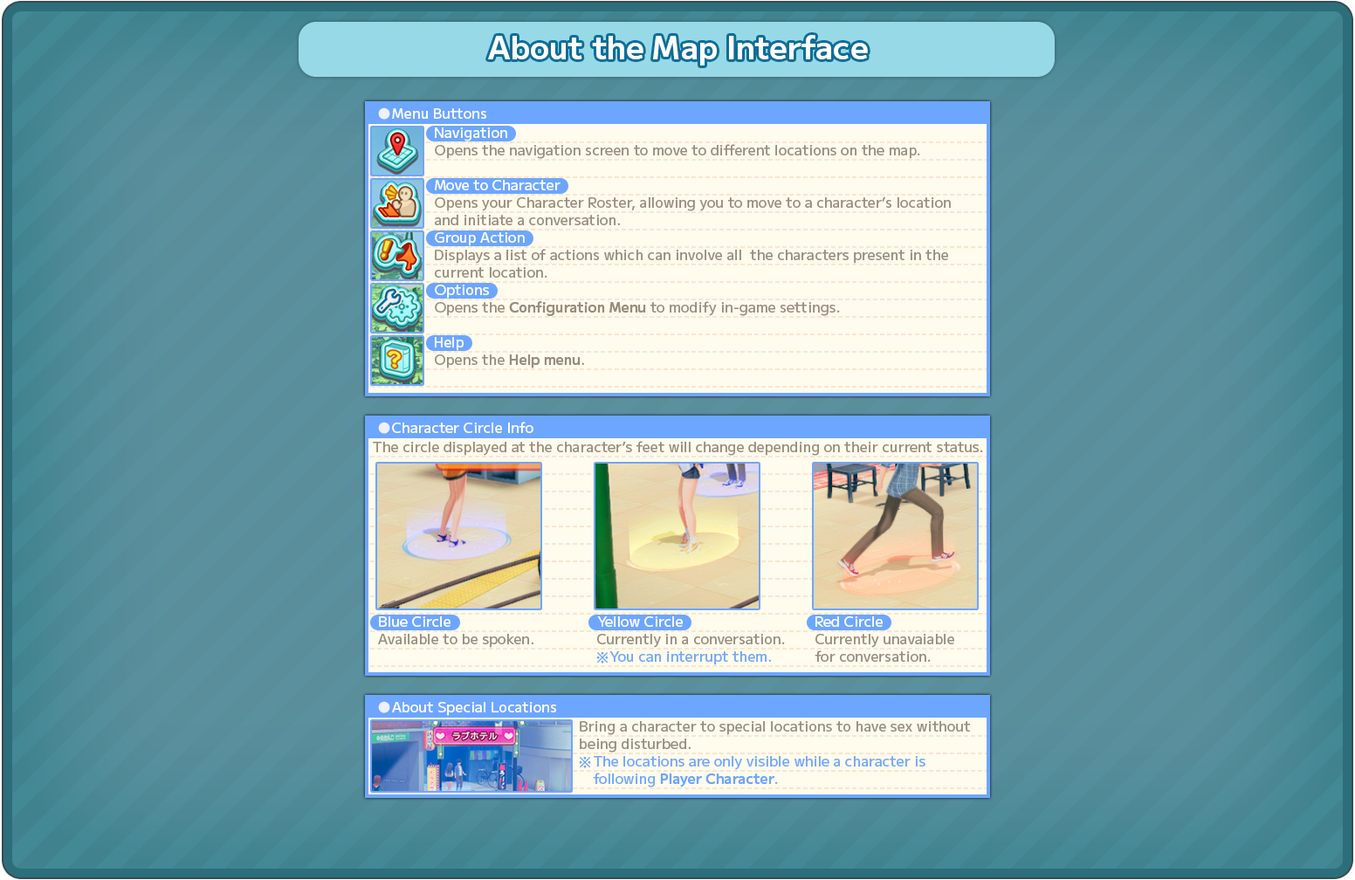
<style>
.page{position:relative;width:1355px;height:880px}
.page>*{position:absolute;margin:0}
.t1{font:31.4px "MPLUS2-SemiBold";color:#ffffff}
.t2{font:14px "MPLUS2-Medium";color:#ffffff}
.t3{font:14px "MPLUS2-Medium";color:#988d7c}
.t4{font:14px/17.5px "MPLUS2-Medium";color:#988d7c}
.t5{font:14px "MPLUS2-SemiBold";color:#988d7c}
.t6{font:14px "MPLUS2-Medium";color:#6da6ff}
.t7{font:14px/17.5px "MPLUS2-Medium";color:#6da6ff}
.t8{font:14px/17.5px "MPLUS2-SemiBold";color:#6da6ff}
</style>
<div class="page">
<p class="t1" style="left:488px;top:35px;width:380px;height:30px">About the Map Interface</p>
<p class="t2" style="left:392px;top:108px;width:94px;height:11px">Menu Buttons</p>
<p class="t2" style="left:435px;top:127px;width:72px;height:14px">Navigation</p>
<p class="t3" style="left:435px;top:144px;width:485px;height:15px">Opens the navigation screen to move to different locations on the map.</p>
<p class="t2" style="left:435px;top:180px;width:126px;height:10px">Move to Character</p>
<p class="t4" style="left:435px;top:197px;width:516px;height:28px">Opens your Character Roster, allowing you to move to a character’s location<br>and initiate a conversation.</p>
<p class="t2" style="left:435px;top:232px;width:90px;height:14px">Group Action</p>
<p class="t4" style="left:435px;top:249px;width:513px;height:29px">Displays a list of actions which can involve all  the characters present in the<br>current location.</p>
<p class="t2" style="left:435px;top:285px;width:54px;height:14px">Options</p>
<p class="t3" style="left:435px;top:301px;width:405px;height:15px">Opens the <span class="t5">Configuration Menu</span> to modify in-game settings.</p>
<p class="t2" style="left:435px;top:337px;width:29px;height:14px">Help</p>
<p class="t3" style="left:435px;top:354px;width:149px;height:14px">Opens the <span class="t5">Help menu</span>.</p>
<p class="t2" style="left:392px;top:422px;width:141px;height:11px">Character Circle Info</p>
<p class="t3" style="left:373px;top:441px;width:610px;height:15px">The circle displayed at the character’s feet will change depending on their current status.</p>
<p class="t2" style="left:379px;top:616px;width:71px;height:11px">Blue Circle</p>
<p class="t2" style="left:597px;top:616px;width:86px;height:11px">Yellow Circle</p>
<p class="t2" style="left:815px;top:616px;width:68px;height:11px">Red Circle</p>
<p class="t3" style="left:378px;top:634px;width:155px;height:14px">Available to be spoken.</p>
<p class="t3" style="left:597px;top:634px;width:188px;height:14px">Currently in a conversation.</p>
<p class="t4" style="left:815px;top:634px;width:139px;height:28px">Currently unavaiable<br>for conversation.</p>
<p class="t6" style="left:609px;top:651px;width:162px;height:14px">You can interrupt them.</p>
<p class="t2" style="left:392px;top:702px;width:164px;height:14px">About Special Locations</p>
<p class="t4" style="left:580px;top:721px;width:390px;height:32px">Bring a character to special locations to have sex without<br>being disturbed.</p>
<p class="t7" style="left:593px;top:756px;width:332px;height:31px">The locations are only visible while a character is<br>following <span class="t8">Player Character</span>.</p>
</div>
